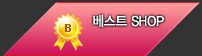
<style>
.page{position:relative;width:202px;height:56px;background:#333333}
.page>*{position:absolute;margin:0}
.t1{font:13.8px "YDIYGO330";letter-spacing:-0.025em;color:#ffffff;font-weight:bold;scale:0.91 1}
.t2{font:11px "Dotum";color:#b35101;font-weight:bold}
</style>
<div class="page">
<p class="t1" style="left:93px;top:14px;width:71px;height:14px">베스트 SHOP</p>
<p class="t2" style="left:65px;top:24px;width:6px;height:8px">B</p>
</div>
